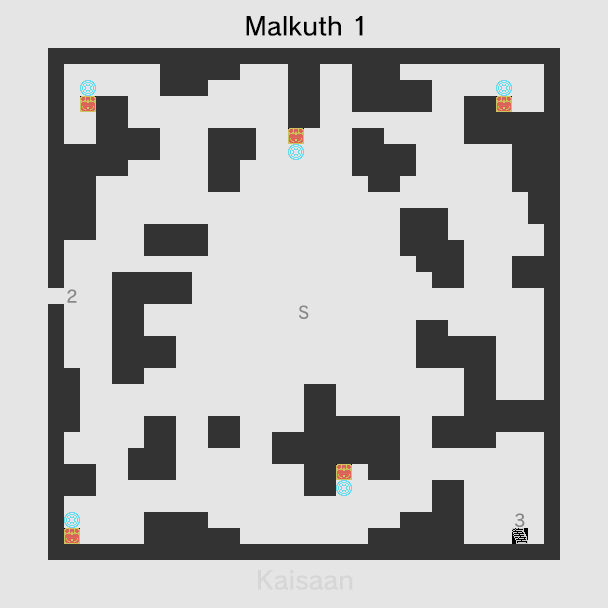
<style>
.page{position:relative;width:608px;height:608px;background:#e5e5e5}
.page>*{position:absolute;margin:0}
.t1{font:25px "nintendoNTLG-DB002";color:#000000}
.t2{font:16.7px "nintendoNTLG-DB002";color:#868787}
.t3{font:25px "nintendoNTLG-DB002";color:#d6d6d6}
</style>
<div class="page">
<p class="t1" style="left:246px;top:16px;width:117px;height:20px">Malkuth 1</p>
<p class="t2" style="left:67px;top:289px;width:10px;height:14px">2</p>
<p class="t2" style="left:299px;top:305px;width:10px;height:14px">S</p>
<p class="t2" style="left:515px;top:513px;width:10px;height:14px">3</p>
<p class="t3" style="left:258px;top:570px;width:95px;height:20px">Kaisaan</p>
</div>
